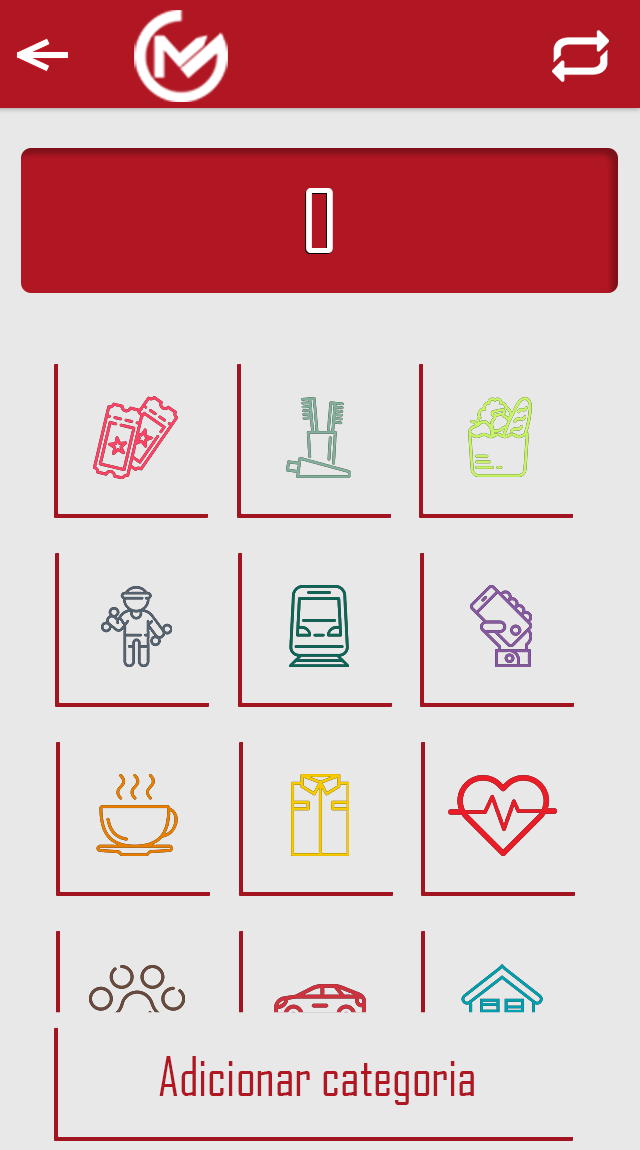
<style>
.page{position:relative;width:640px;height:1150px;background:#e8e8e8}
.page>*{position:absolute;margin:0}
.t1{font:84.7px "AgencyFB-Reg";color:#ffffff}
.t2{font:51.7px "AgencyFB-Reg";color:#b11623}
</style>
<div class="page">
<p class="t1" style="left:306px;top:188px;width:27px;height:65px">0</p>
<p class="t2" style="left:159px;top:1056px;width:315px;height:49px">Adicionar categoria</p>
</div>
